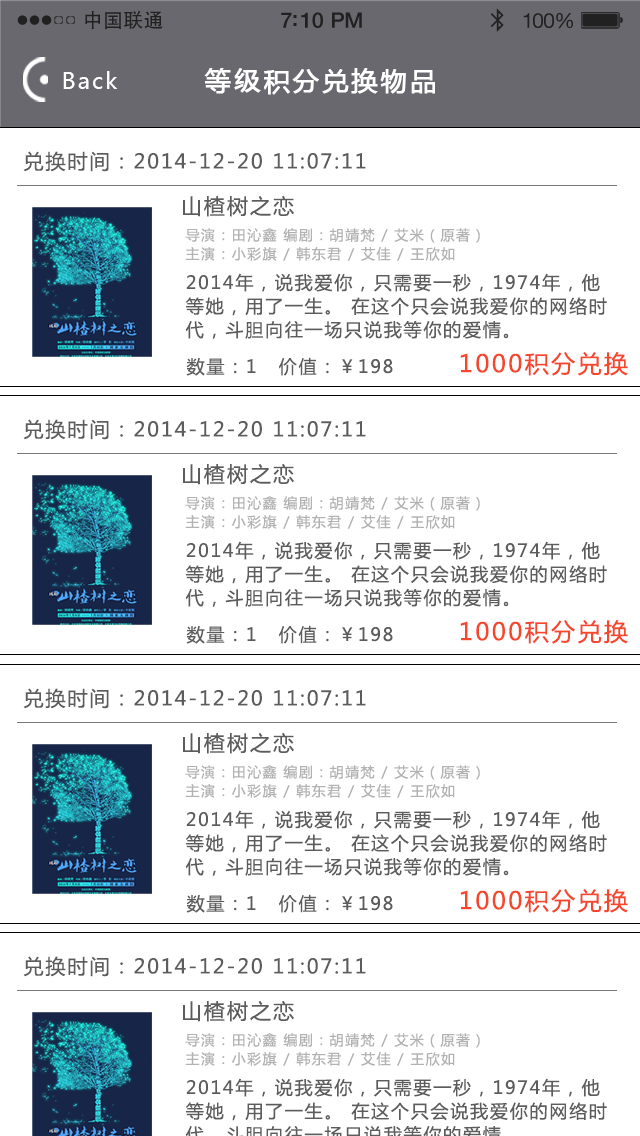
<style>
.page{position:relative;width:640px;height:1136px;background:#ffffff}
.page>*{position:absolute;margin:0}
.t1{font:19.7px "AdobeHeitiStd-Regular";letter-spacing:0.02em;color:#212121}
.t2{font:21.4px "HelveticaNeue-Medium";letter-spacing:-0.02em;color:#212121}
.t3{font:20.6px "HelveticaNeue";letter-spacing:-0.02em;color:#212121}
.t4{font:22px "MicrosoftYaHei";letter-spacing:0.1em;color:#ffffff}
.t5{font:26px "MicrosoftYaHei";letter-spacing:0.1em;color:#ffffff;font-weight:bold}
.t6{font:20px "MicrosoftYaHei";letter-spacing:0.1em;color:#5c5c5c}
.t7{font:21px "MicrosoftYaHei";letter-spacing:0.1em;color:#5c5c5c}
.t8{font:14px/18.9px "MicrosoftYaHei";letter-spacing:0.1em;color:#b2b2b2}
.t9{font:18px/23.6px "MicrosoftYaHei";letter-spacing:0.1em;color:#5c5c5c}
.t10{font:24px "MicrosoftYaHei";letter-spacing:0.1em;color:#f6462c}
.t11{font:18px "MicrosoftYaHei";letter-spacing:0.1em;color:#5c5c5c}
</style>
<div class="page">
<p class="t1" style="left:85px;top:10px;width:78px;height:20px">中国联通</p>
<p class="t2" style="left:281px;top:12px;width:81px;height:16px">7:10 PM</p>
<p class="t3" style="left:523px;top:13px;width:50px;height:16px">100%</p>
<p class="t4" style="left:63px;top:71px;width:55px;height:18px">Back</p>
<p class="t5" style="left:204px;top:68px;width:231px;height:27px">等级积分兑换物品</p>
<p class="t6" style="left:23px;top:151px;width:343px;height:21px">兑换时间：2014-12-20 11:07:11</p>
<p class="t7" style="left:183px;top:196px;width:111px;height:21px">山楂树之恋</p>
<p class="t8" style="left:185px;top:228px;width:295px;height:33px">导演：田沁鑫 编剧：胡靖梵 / 艾米（原著）<br>主演：小彩旗 / 韩东君 / 艾佳 / 王欣如</p>
<p class="t9" style="left:185px;top:273px;width:422px;height:66px">2014年，说我爱你，只需要一秒，1974年，他<br>等她，用了一生。 在这个只会说我爱你的网络时<br>代，斗胆向往一场只说我等你的爱情。</p>
<p class="t10" style="left:460px;top:352px;width:168px;height:24px">1000积分兑换</p>
<p class="t11" style="left:186px;top:357px;width:70px;height:19px">数量：1</p>
<p class="t11" style="left:278px;top:357px;width:115px;height:19px">价值：￥198</p>
<p class="t6" style="left:23px;top:419px;width:343px;height:21px">兑换时间：2014-12-20 11:07:11</p>
<p class="t7" style="left:183px;top:464px;width:111px;height:21px">山楂树之恋</p>
<p class="t8" style="left:185px;top:496px;width:295px;height:33px">导演：田沁鑫 编剧：胡靖梵 / 艾米（原著）<br>主演：小彩旗 / 韩东君 / 艾佳 / 王欣如</p>
<p class="t9" style="left:185px;top:541px;width:422px;height:66px">2014年，说我爱你，只需要一秒，1974年，他<br>等她，用了一生。 在这个只会说我爱你的网络时<br>代，斗胆向往一场只说我等你的爱情。</p>
<p class="t11" style="left:186px;top:625px;width:70px;height:19px">数量：1</p>
<p class="t11" style="left:278px;top:625px;width:115px;height:19px">价值：￥198</p>
<p class="t10" style="left:460px;top:620px;width:168px;height:24px">1000积分兑换</p>
<p class="t6" style="left:23px;top:688px;width:343px;height:21px">兑换时间：2014-12-20 11:07:11</p>
<p class="t7" style="left:183px;top:733px;width:111px;height:21px">山楂树之恋</p>
<p class="t8" style="left:185px;top:765px;width:295px;height:33px">导演：田沁鑫 编剧：胡靖梵 / 艾米（原著）<br>主演：小彩旗 / 韩东君 / 艾佳 / 王欣如</p>
<p class="t9" style="left:185px;top:810px;width:422px;height:66px">2014年，说我爱你，只需要一秒，1974年，他<br>等她，用了一生。 在这个只会说我爱你的网络时<br>代，斗胆向往一场只说我等你的爱情。</p>
<p class="t11" style="left:186px;top:894px;width:70px;height:19px">数量：1</p>
<p class="t11" style="left:278px;top:894px;width:115px;height:19px">价值：￥198</p>
<p class="t10" style="left:460px;top:889px;width:168px;height:24px">1000积分兑换</p>
<p class="t6" style="left:23px;top:956px;width:343px;height:21px">兑换时间：2014-12-20 11:07:11</p>
<p class="t7" style="left:183px;top:1001px;width:111px;height:21px">山楂树之恋</p>
<p class="t8" style="left:185px;top:1033px;width:295px;height:33px">导演：田沁鑫 编剧：胡靖梵 / 艾米（原著）<br>主演：小彩旗 / 韩东君 / 艾佳 / 王欣如</p>
</div>
